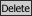
<style>
.page{position:relative;width:32px;height:16px;background:#cdcdcd}
.page>*{position:absolute;margin:0}
.t1{font:10px "Tahoma";color:#000000}
</style>
<div class="page">
<p class="t1" style="left:2px;top:4px;width:28px;height:8px">Delete</p>
</div>
